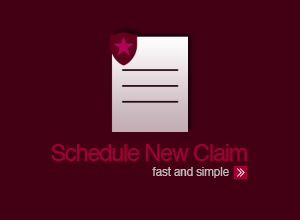
<style>
.page{position:relative;width:300px;height:220px;background:#430015}
.page>*{position:absolute;margin:0}
.t1{font:23.6px "Helvetica";letter-spacing:-0.05em;color:#a20032}
.t2{font:11.6px "Helvetica";letter-spacing:-0.01em;color:#bdbcbc}
</style>
<div class="page">
<p class="t1" style="left:51px;top:144px;width:196px;height:17px">Schedule New Claim</p>
<p class="t2" style="left:152px;top:167px;width:77px;height:11px">fast and simple</p>
</div>
